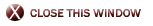
<style>
.page{position:relative;width:153px;height:26px;background:#ffffff}
.page>*{position:absolute;margin:0}
.t1{font:21.6px "LucidaConsole";color:#ffffff;scale:0.92 1}
.t2{font:12px "FranklinGothic-Medium"}
</style>
<div class="page">
<p class="t1" style="left:9px;top:5px;width:12px;height:14px">X</p>
<p class="t2" style="left:30px;top:9px;width:111px;height:8px">CLOSE THIS WINDOW</p>
</div>
